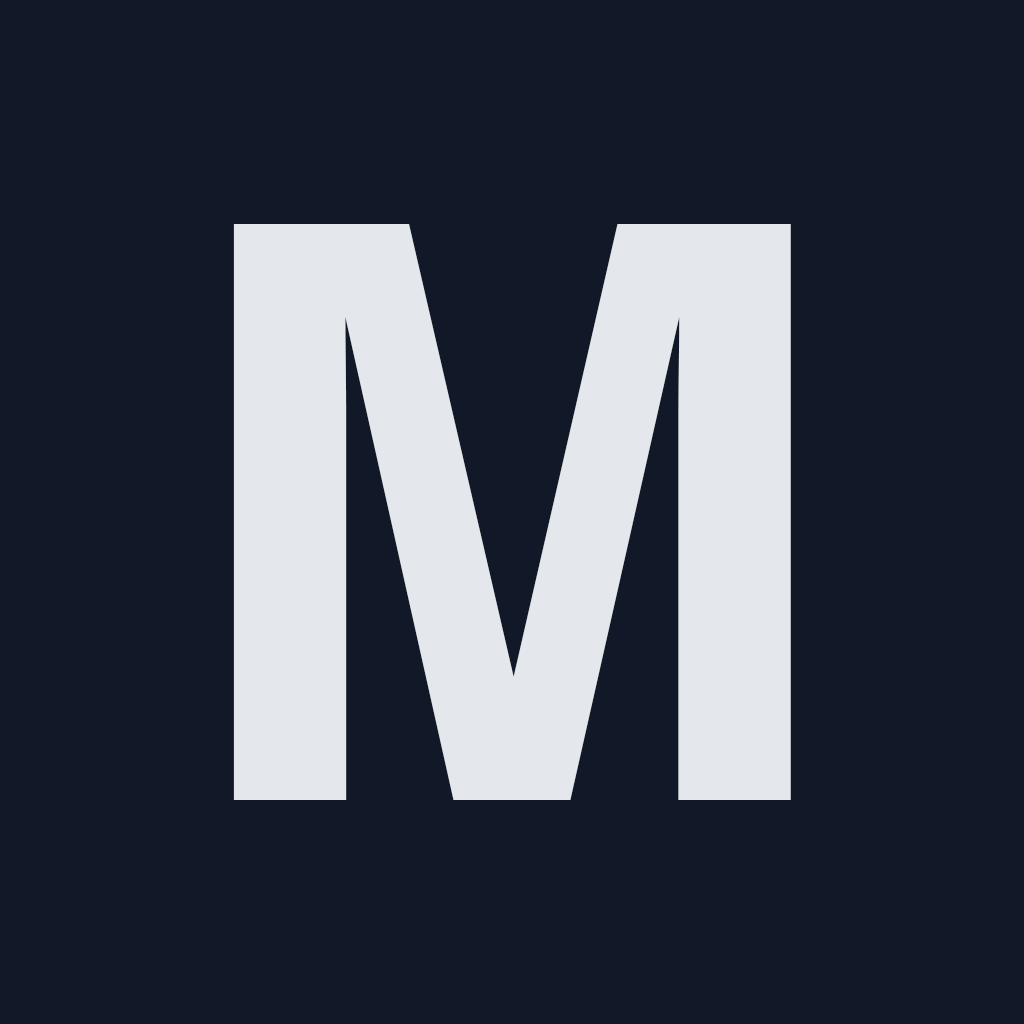
<style>
.page{position:relative;width:1024px;height:1024px;background:#111827}
.page>*{position:absolute;margin:0}
.t1{font:800px "Helvetica-Bold";color:#e4e7eb}
</style>
<div class="page">
<p class="t1" style="left:233px;top:224px;width:558px;height:576px">M</p>
</div>
